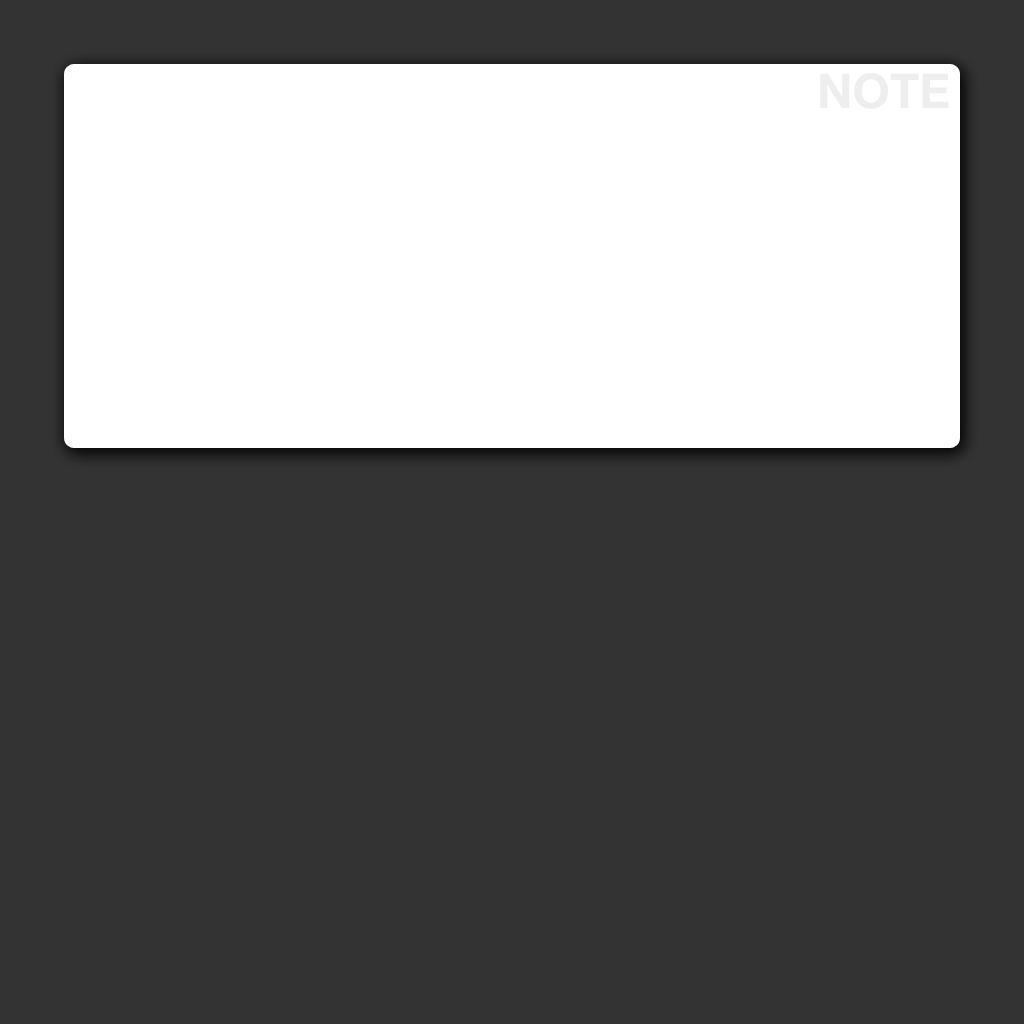
<style>
.page{position:relative;width:1024px;height:1024px;background:#333333}
.page>*{position:absolute;margin:0}
.t1{font:48px "HelveticaNeue-Bold";color:#eeeeee}
</style>
<div class="page">
<p class="t1" style="left:820px;top:73px;width:129px;height:36px">NOTE</p>
</div>
